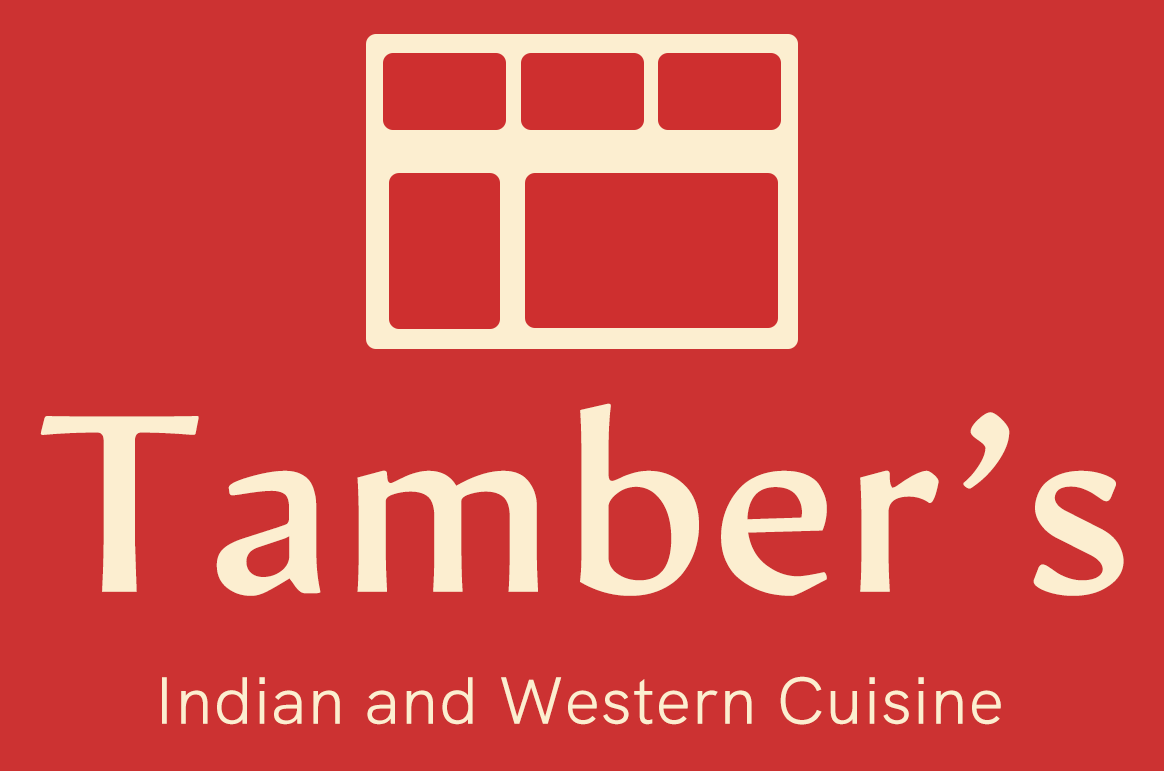
<style>
.page{position:relative;width:1164px;height:771px;background:#cc3232}
.page>*{position:absolute;margin:0}
.t1{font:250px "ø";color:#fceed0}
.t2{font:66.7px "HKGrotesk-Regular";letter-spacing:0.01em;color:#fceed0}
</style>
<div class="page">
<p class="t1" style="left:40px;top:403px;width:1084px;height:193px">Tamber’s</p>
<p class="t2" style="left:162px;top:676px;width:839px;height:49px">Indian and Western Cuisine</p>
</div>
